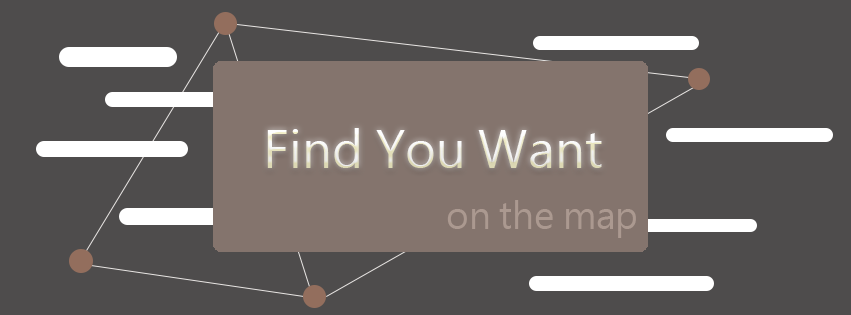
<style>
.page{position:relative;width:851px;height:315px;background:#4e4c4c}
.page>*{position:absolute;margin:0}
.t1{font:49.3px "MicrosoftJhengHeiUIRegular"}
.t2{font:35.6px "MicrosoftJhengHeiUIRegular";color:#ab9990}
</style>
<div class="page">
<p class="t1" style="left:267px;top:128px;width:335px;height:40px">Find You Want</p>
<p class="t2" style="left:447px;top:200px;width:189px;height:38px">on the map</p>
</div>
